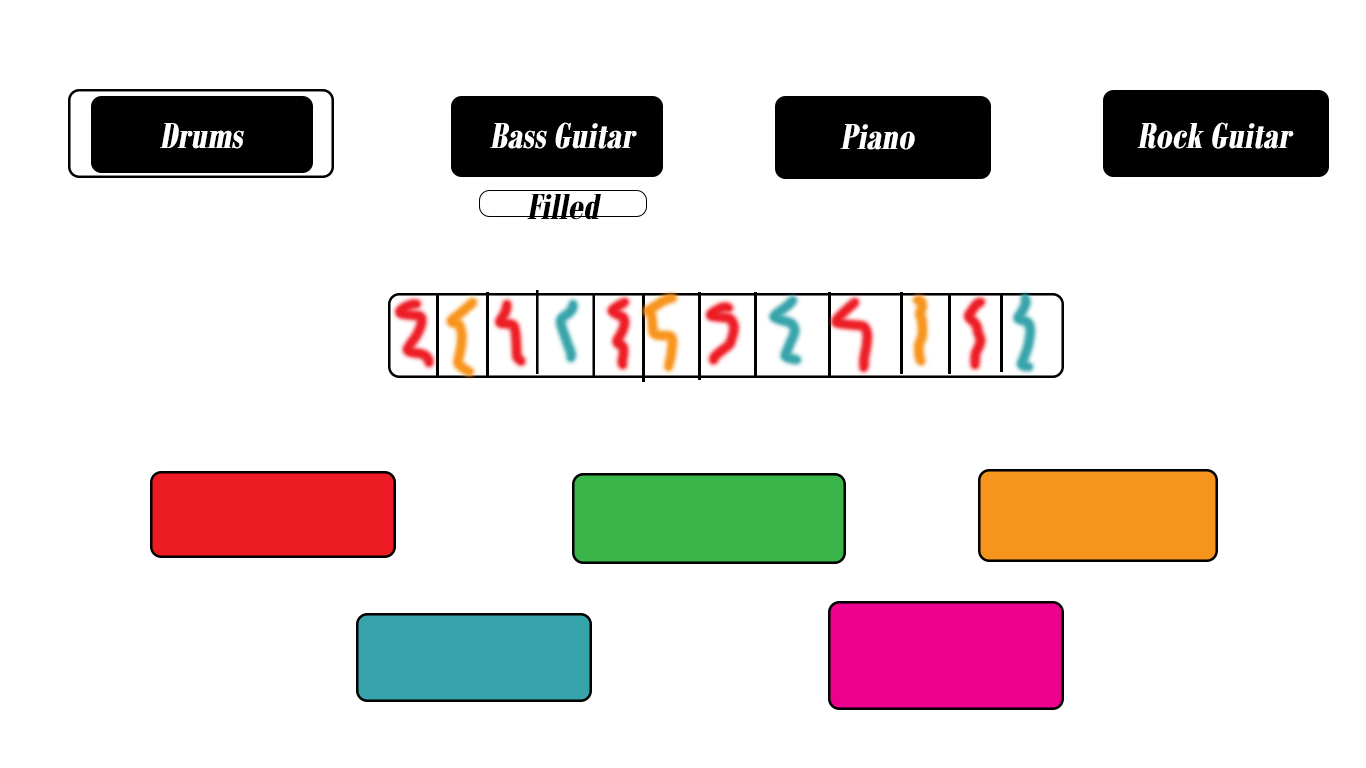
<style>
.page{position:relative;width:1366px;height:768px;background:#ffffff}
.page>*{position:absolute;margin:0}
.t1{font:39px "BodoniMTCondensed-Bold";color:#ffffff;font-style:italic}
.t2{font:39px "BodoniMTCondensed-Bold";color:#000000;font-style:italic}
</style>
<div class="page">
<p class="t1" style="left:160px;top:123px;width:84px;height:26px">Drums</p>
<p class="t1" style="left:490px;top:122px;width:147px;height:27px">Bass Guitar</p>
<p class="t1" style="left:840px;top:124px;width:75px;height:26px">Piano</p>
<p class="t1" style="left:1137px;top:122px;width:157px;height:27px">Rock Guitar</p>
<p class="t2" style="left:527px;top:194px;width:74px;height:26px">Filled</p>
</div>
